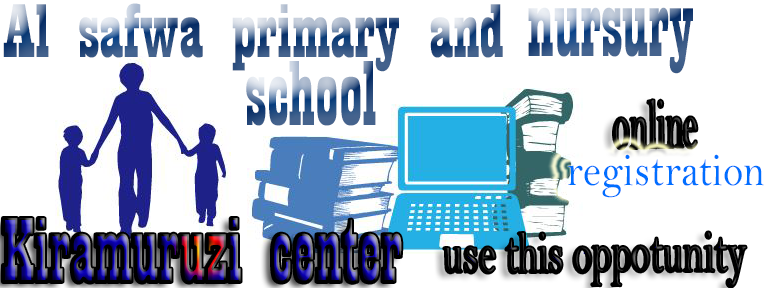
<style>
.page{position:relative;width:765px;height:288px;background:#ffffff}
.page>*{position:absolute;margin:0}
.t1{font:79.4px "Playbill";scale:1.21 1}
.t2{font:96px "Playbill"}
.t3{font:70.3px "BellMT";scale:0.48 1}
.t4{font:46.1px "BellMT";color:#006fff;scale:0.89 1}
.t5{font:58.5px "BellMT";scale:0.66 1}
</style>
<div class="page">
<p class="t1" style="left:3px;top:3px;width:500px;height:69px">Al safwa primary and</p>
<p class="t2" style="left:528px;top:7px;width:165px;height:67px">nursury</p>
<p class="t2" style="left:246px;top:61px;width:130px;height:65px">school</p>
<p class="t3" style="left:614px;top:100px;width:83px;height:49px;rotate:-1deg">online</p>
<p class="t4" style="left:568px;top:154px;width:196px;height:44px">registration</p>
<p class="t2" style="left:3px;top:218px;width:399px;height:65px">Kiramuruzi center</p>
<p class="t5" style="left:444px;top:232px;width:302px;height:55px">use this oppotunity</p>
</div>
